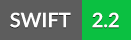
<style>
.page{position:relative;width:131px;height:40px;background:#5d5d5d}
.page>*{position:absolute;margin:0}
.t1{font:20px "Lato-Bold";color:#ffffff}
</style>
<div class="page">
<p class="t1" style="left:10px;top:12px;width:61px;height:16px">SWIFT</p>
<p class="t1" style="left:92px;top:12px;width:27px;height:16px">2.2</p>
</div>
